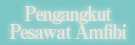
<style>
.page{position:relative;width:135px;height:45px;background:#7dc6c6}
.page>*{position:absolute;margin:0}
.t1{font:20px/18px "RyuminPro-ExBold";letter-spacing:-0.08em;color:#f1e6d8;scale:0.9 1}
</style>
<div class="page">
<p class="t1" style="left:9px;top:6px;width:118px;height:34px;text-align:center">Pengangkut<br>Pesawat Amfibi</p>
</div>
